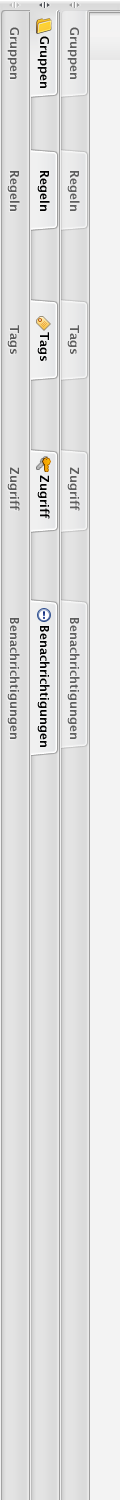
<style>
.page{position:relative;width:120px;height:1500px;background:#f3f3f3}
.page>*{position:absolute;margin:0}
.t1{font:12px "LucidaGrande-Bold";color:#5a5a5a}
.t2{font:12px "LucidaGrande-Bold";color:#5e5e5e}
.t3{font:12px "LucidaGrande-Bold";color:#000000}
</style>
<div class="page">
<p class="t1" style="left:7px;top:27px;width:12px;height:52px;rotate:90deg">Gruppen</p>
<p class="t2" style="left:67px;top:27px;width:12px;height:52px;rotate:90deg">Gruppen</p>
<p class="t3" style="left:37px;top:36px;width:12px;height:52px;rotate:90deg">Gruppen</p>
<p class="t1" style="left:7px;top:171px;width:13px;height:40px;rotate:90deg">Regeln</p>
<p class="t3" style="left:37px;top:171px;width:13px;height:40px;rotate:90deg">Regeln</p>
<p class="t2" style="left:67px;top:171px;width:13px;height:40px;rotate:90deg">Regeln</p>
<p class="t1" style="left:7px;top:325px;width:12px;height:29px;rotate:90deg">Tags</p>
<p class="t2" style="left:67px;top:325px;width:12px;height:29px;rotate:90deg">Tags</p>
<p class="t3" style="left:37px;top:332px;width:12px;height:29px;rotate:90deg">Tags</p>
<p class="t1" style="left:7px;top:467px;width:13px;height:44px;rotate:90deg">Zugriff</p>
<p class="t2" style="left:67px;top:467px;width:13px;height:44px;rotate:90deg">Zugriff</p>
<p class="t3" style="left:37px;top:475px;width:13px;height:44px;rotate:90deg">Zugriff</p>
<p class="t1" style="left:7px;top:618px;width:13px;height:121px;rotate:90deg">Benachrichtigungen</p>
<p class="t3" style="left:37px;top:626px;width:13px;height:121px;rotate:90deg">Benachrichtigungen</p>
<p class="t2" style="left:67px;top:618px;width:13px;height:121px;rotate:90deg">Benachrichtigungen</p>
</div>
